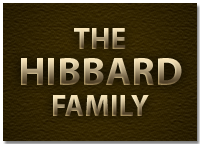
<style>
.page{position:relative;width:200px;height:144px}
.page>*{position:absolute;margin:0}
.t1{font:30px "MyriadPro-Bold"}
.t2{font:40px "MyriadPro-Bold"}
</style>
<div class="page">
<p class="t1" style="left:74px;top:28px;width:52px;height:21px">THE</p>
<p class="t2" style="left:21px;top:58px;width:161px;height:27px">HIBBARD</p>
<p class="t1" style="left:53px;top:95px;width:96px;height:21px">FAMILY</p>
</div>
